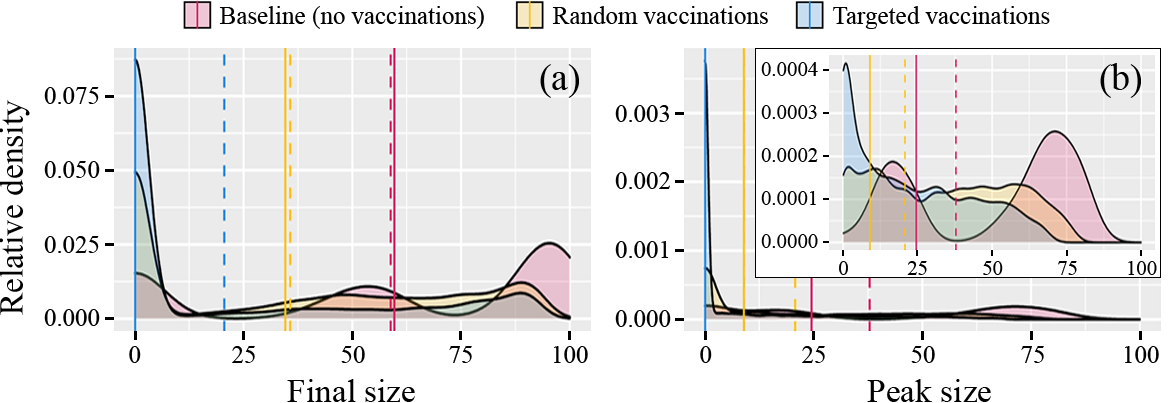
<style>
.page{position:relative;width:1171px;height:403px;background:#ffffff}
.page>*{position:absolute;margin:0}
.t1{font:25px "TimesNewRomanPSMT";color:#010101}
.t2{font:37.5px "TimesNewRomanPSMT";color:#010101}
.t3{font:20.8px "TimesNewRomanPSMT";color:#000000}
.t4{font:33.3px "TimesNewRomanPSMT";color:#010101}
</style>
<div class="page">
<p class="t1" style="left:219px;top:6px;width:265px;height:23px">Baseline (no vaccinations)</p>
<p class="t1" style="left:552px;top:6px;width:216px;height:18px">Random vaccinations</p>
<p class="t1" style="left:833px;top:6px;width:217px;height:23px">Targeted vaccinations</p>
<p class="t2" style="left:540px;top:64px;width:39px;height:34px">(a)</p>
<p class="t3" style="left:761px;top:62px;width:57px;height:14px">0.0004</p>
<p class="t2" style="left:1100px;top:63px;width:41px;height:35px">(b)</p>
<p class="t1" style="left:44px;top:87px;width:55px;height:17px">0.075</p>
<p class="t4" style="left:0px;top:100px;width:30px;height:215px;rotate:-90deg">Relative density</p>
<p class="t1" style="left:615px;top:105px;width:54px;height:17px">0.003</p>
<p class="t3" style="left:761px;top:105px;width:56px;height:14px">0.0003</p>
<p class="t3" style="left:761px;top:148px;width:57px;height:14px">0.0002</p>
<p class="t1" style="left:44px;top:161px;width:56px;height:17px">0.050</p>
<p class="t1" style="left:615px;top:172px;width:55px;height:17px">0.002</p>
<p class="t3" style="left:761px;top:191px;width:55px;height:14px">0.0001</p>
<p class="t1" style="left:44px;top:236px;width:55px;height:17px">0.025</p>
<p class="t1" style="left:615px;top:241px;width:54px;height:17px">0.001</p>
<p class="t3" style="left:761px;top:234px;width:57px;height:14px">0.0000</p>
<p class="t3" style="left:839px;top:261px;width:9px;height:14px">0</p>
<p class="t3" style="left:907px;top:261px;width:20px;height:14px">25</p>
<p class="t3" style="left:983px;top:261px;width:20px;height:14px">50</p>
<p class="t3" style="left:1058px;top:261px;width:19px;height:14px">75</p>
<p class="t3" style="left:1128px;top:261px;width:29px;height:14px">100</p>
<p class="t1" style="left:44px;top:309px;width:56px;height:17px">0.000</p>
<p class="t1" style="left:615px;top:310px;width:56px;height:17px">0.000</p>
<p class="t1" style="left:129px;top:346px;width:12px;height:17px">0</p>
<p class="t1" style="left:232px;top:346px;width:23px;height:17px">25</p>
<p class="t1" style="left:341px;top:346px;width:24px;height:17px">50</p>
<p class="t1" style="left:449px;top:346px;width:23px;height:17px">75</p>
<p class="t1" style="left:554px;top:346px;width:34px;height:17px">100</p>
<p class="t1" style="left:700px;top:346px;width:12px;height:17px">0</p>
<p class="t1" style="left:802px;top:346px;width:23px;height:17px">25</p>
<p class="t1" style="left:911px;top:346px;width:24px;height:17px">50</p>
<p class="t1" style="left:1021px;top:346px;width:23px;height:17px">75</p>
<p class="t1" style="left:1125px;top:346px;width:34px;height:17px">100</p>
<p class="t4" style="left:287px;top:379px;width:128px;height:23px">Final size</p>
<p class="t4" style="left:867px;top:379px;width:124px;height:23px">Peak size</p>
</div>
